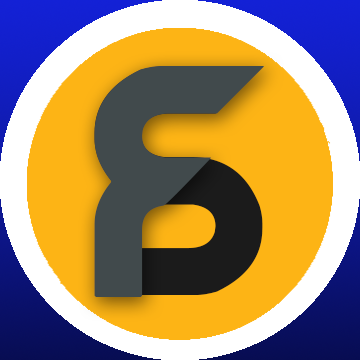
<style>
.page{position:relative;width:360px;height:360px;background:#fdb415}
.page>*{position:absolute;margin:0}
.t1{font:348.4px "SUPERHERO";letter-spacing:0.02em}
.t2{font:351.9px "SUPERHERO";letter-spacing:0.02em;color:#414a4c}
</style>
<div class="page">
<p class="t1" style="left:94px;top:66px;width:169px;height:229px">S</p>
<p class="t2" style="left:94px;top:66px;width:170px;height:231px">F</p>
</div>
